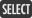
<style>
.page{position:relative;width:32px;height:18px;background:#363636}
.page>*{position:absolute;margin:0}
.t1{font:13px "Futura-CondensedMedium";color:#ededed}
</style>
<div class="page">
<p class="t1" style="left:2px;top:3px;width:29px;height:12px">SELECT</p>
</div>
